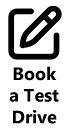
<style>
.page{position:relative;width:68px;height:131px;background:#ffffff}
.page>*{position:absolute;margin:0}
.t1{font:18px "MicrosoftTaiLe-Bold";color:#000000}
</style>
<div class="page">
<p class="t1" style="left:9px;top:66px;width:50px;height:58px;text-align:center">Book<br>a Test<br>Drive</p>
</div>
